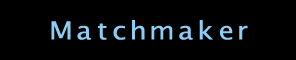
<style>
.page{position:relative;width:296px;height:60px;background:#000000}
.page>*{position:absolute;margin:0}
.t1{font:25px "LucidaSansUnicode";letter-spacing:0.26em;color:#8dcff4;scale:1.11 1}
</style>
<div class="page">
<p class="t1" style="left:51px;top:20px;width:197px;height:20px">Matchmaker</p>
</div>
